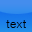
<style>
.page{position:relative;width:32px;height:32px}
.page>*{position:absolute;margin:0}
.t1{font:12px "Gulim";color:#000000}
</style>
<div class="page">
<p class="t1" style="left:6px;top:20px;width:20px;height:8px">text</p>
</div>
